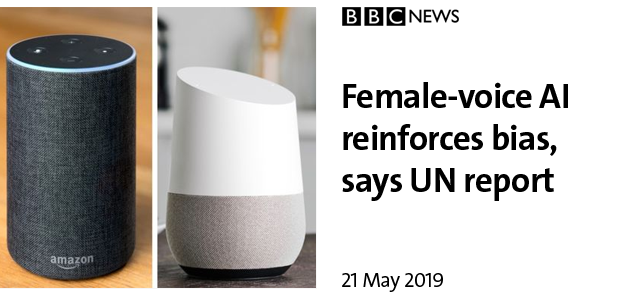
<style>
.page{position:relative;width:633px;height:300px;background:#ffffff}
.page>*{position:absolute;margin:0}
.t1{font:35px "V&ATheSansC6s-Bold";letter-spacing:-0.02em;color:#000000}
.t2{font:20.8px "V&ATheSansC6s-SemiLight";letter-spacing:-0.02em;color:#000000}
</style>
<div class="page">
<p class="t1" style="left:342px;top:82px;width:226px;height:119px">Female-voice AI<br>reinforces bias,<br>says UN report</p>
<p class="t2" style="left:342px;top:273px;width:101px;height:19px">21 May 2019</p>
</div>
